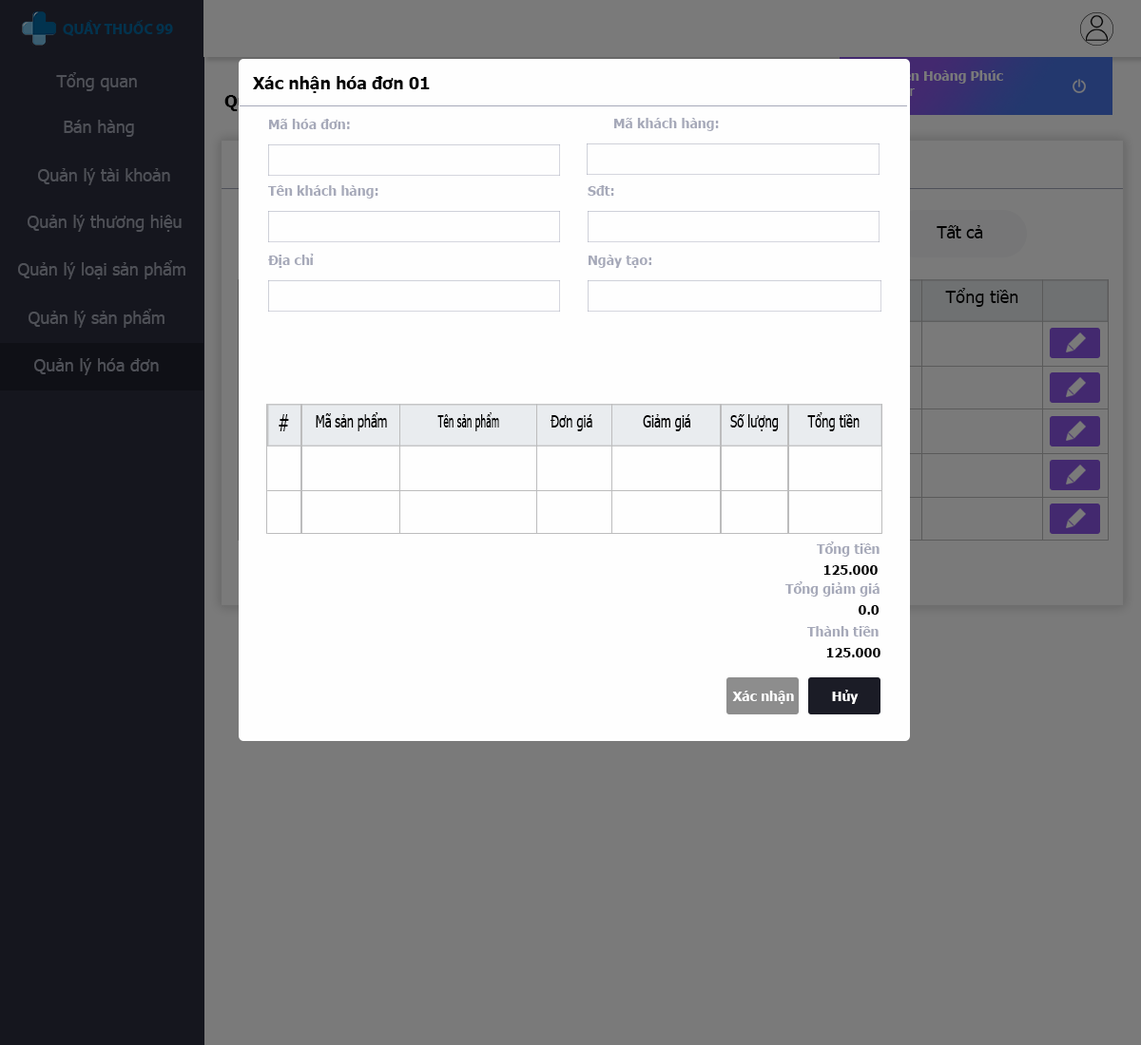
<style>
.page{position:relative;width:1141px;height:1045px;background:#7a7a7a}
.page>*{position:absolute;margin:0}
.t1{font:15.2px "MyriadPro-Bold";color:#01334e}
.t2{font:17.1px "Tahoma";color:#4f5158}
.t3{font:16.8px "Tahoma-Bold";color:#000000}
.t4{font:13.3px "Tahoma-Bold"}
.t5{font:13.3px "Tahoma"}
.t6{font:13.3px "Tahoma-Bold";color:#a6a9b9}
.t7{font:16.8px "Tahoma";color:#000000}
.t8{font:17px "Tahoma";color:#000000}
.t9{font:17.1px "Tahoma";color:#000000;scale:0.71 1}
.t10{font:17.1px "Tahoma";color:#000000;scale:0.57 1}
.t11{font:17px "Tahoma";color:#000000;scale:0.73 1}
.t12{font:22.8px "Tahoma";color:#000000;scale:0.71 1}
.t13{font:17.1px "Tahoma";color:#000000;scale:0.72 1}
.t14{font:13.3px "Tahoma-Bold";color:#000000}
.t15{font:13.3px "Tahoma-Bold";color:#ffffff}
</style>
<div class="page">
<p class="t1" style="left:63px;top:20px;width:110px;height:16px">QUẦY THUỐC 99</p>
<p class="t2" style="left:56px;top:72px;width:81px;height:19px">Tổng quan</p>
<p class="t3" style="left:253px;top:76px;width:177px;height:17px">Xác nhận hóa đơn 01</p>
<p class="t4" style="left:868px;top:67px;width:135px;height:29px">Nguyễn Hoàng Phúc<br><span class="t5">Director</span></p>
<p class="t2" style="left:64px;top:120px;width:70px;height:17px">Bán hàng</p>
<p class="t6" style="left:269px;top:119px;width:81px;height:10px">Mã hóa đơn:</p>
<p class="t6" style="left:614px;top:118px;width:105px;height:13px">Mã khách hàng:</p>
<p class="t2" style="left:38px;top:168px;width:132px;height:17px">Quản lý tài khoản</p>
<p class="t6" style="left:268px;top:185px;width:110px;height:14px">Tên khách hàng:</p>
<p class="t6" style="left:587px;top:185px;width:27px;height:11px">Sđt:</p>
<p class="t2" style="left:28px;top:215px;width:154px;height:17px">Quản lý thương hiệu</p>
<p class="t7" style="left:936px;top:225px;width:47px;height:14px">Tất cả</p>
<p class="t6" style="left:268px;top:254px;width:46px;height:14px">Địa chỉ</p>
<p class="t6" style="left:588px;top:255px;width:63px;height:13px">Ngày tạo:</p>
<p class="t2" style="left:18px;top:260px;width:167px;height:19px">Quản lý loại sản phẩm</p>
<p class="t8" style="left:945px;top:288px;width:73px;height:19px">Tổng tiền</p>
<p class="t2" style="left:29px;top:309px;width:135px;height:19px">Quản lý sản phẩm</p>
<p class="t2" style="left:34px;top:358px;width:125px;height:17px">Quản lý hóa đơn</p>
<p class="t9" style="left:316px;top:412px;width:71px;height:20px">Mã sản phẩm</p>
<p class="t10" style="left:437px;top:412px;width:62px;height:20px">Tên sản phẩm</p>
<p class="t11" style="left:807px;top:412px;width:52px;height:20px">Tổng tiền</p>
<p class="t12" style="left:278px;top:414px;width:11px;height:18px">#</p>
<p class="t9" style="left:550px;top:414px;width:42px;height:18px">Đơn giá</p>
<p class="t13" style="left:643px;top:414px;width:47px;height:18px">Giảm giá</p>
<p class="t13" style="left:730px;top:414px;width:48px;height:18px">Số lượng</p>
<p class="t6" style="left:816px;top:542px;width:63px;height:15px">Tổng tiền</p>
<p class="t14" style="left:823px;top:566px;width:54px;height:9px">125.000</p>
<p class="t6" style="left:785px;top:582px;width:94px;height:15px">Tổng giảm giá</p>
<p class="t14" style="left:858px;top:605px;width:21px;height:10px">0.0</p>
<p class="t6" style="left:807px;top:626px;width:71px;height:11px">Thành tiền</p>
<p class="t14" style="left:826px;top:648px;width:54px;height:10px">125.000</p>
<p class="t15" style="left:732px;top:691px;width:62px;height:13px">Xác nhận</p>
<p class="t15" style="left:832px;top:690px;width:26px;height:14px">Hủy</p>
</div>
